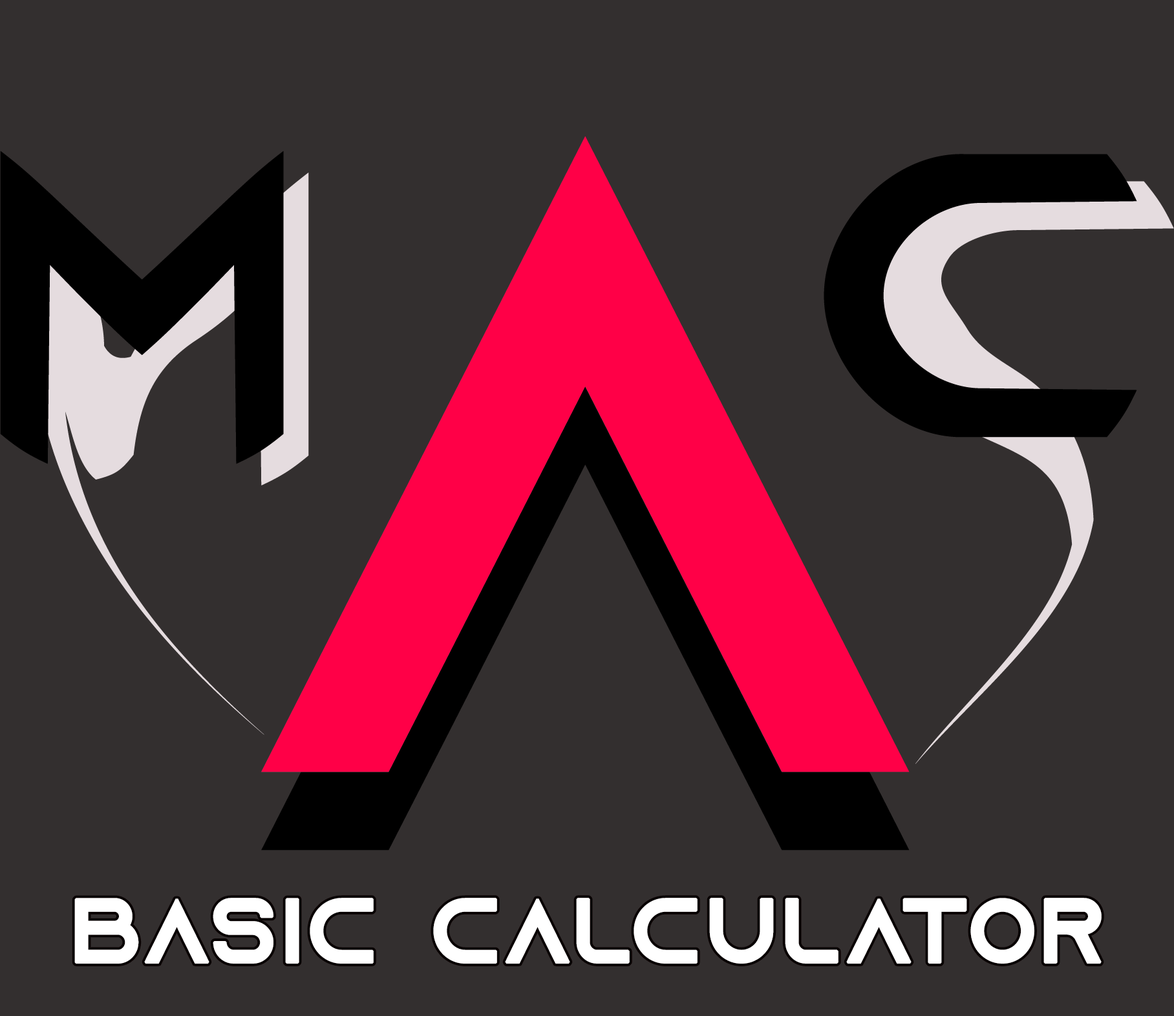
<style>
.page{position:relative;width:1174px;height:1016px;background:#332f2f}
.page>*{position:absolute;margin:0}
.t1{font:90.2px "AzonixRegular";letter-spacing:0.04em;color:#ffffff;font-weight:bold;scale:0.97 1}
</style>
<div class="page">
<p class="t1" style="left:74px;top:898px;width:1027px;height:66px">Basic calculator</p>
</div>
